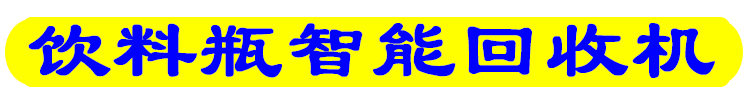
<style>
.page{position:relative;width:750px;height:100px;background:#ffff00}
.page>*{position:absolute;margin:0}
.t1{font:84px "LiSu";color:#0000ff;font-weight:bold}
.t2{font:84px "LiSu";color:#010101;font-weight:bold}
</style>
<div class="page">
<p class="t1" style="left:28px;top:23px;width:687px;height:55px"><span class="t2">  </span>饮料瓶智能回收机</p>
</div>
